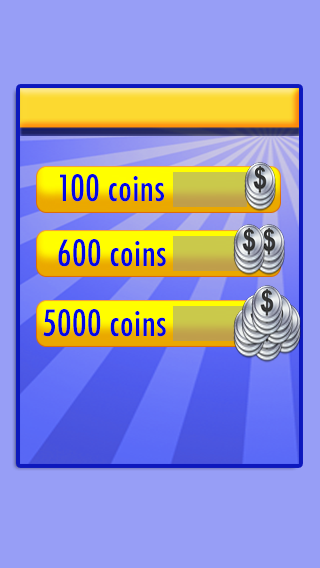
<style>
.page{position:relative;width:320px;height:568px;background:#979ef6}
.page>*{position:absolute;margin:0}
.t1{font:35.3px "Futura-CondensedMedium";letter-spacing:0.01em;color:#0307e5}
</style>
<div class="page">
<p class="t1" style="left:60px;top:174px;width:104px;height:28px">100 coins</p>
<p class="t1" style="left:58px;top:239px;width:108px;height:28px">600 coins</p>
<p class="t1" style="left:43px;top:309px;width:123px;height:28px">5000 coins</p>
</div>
